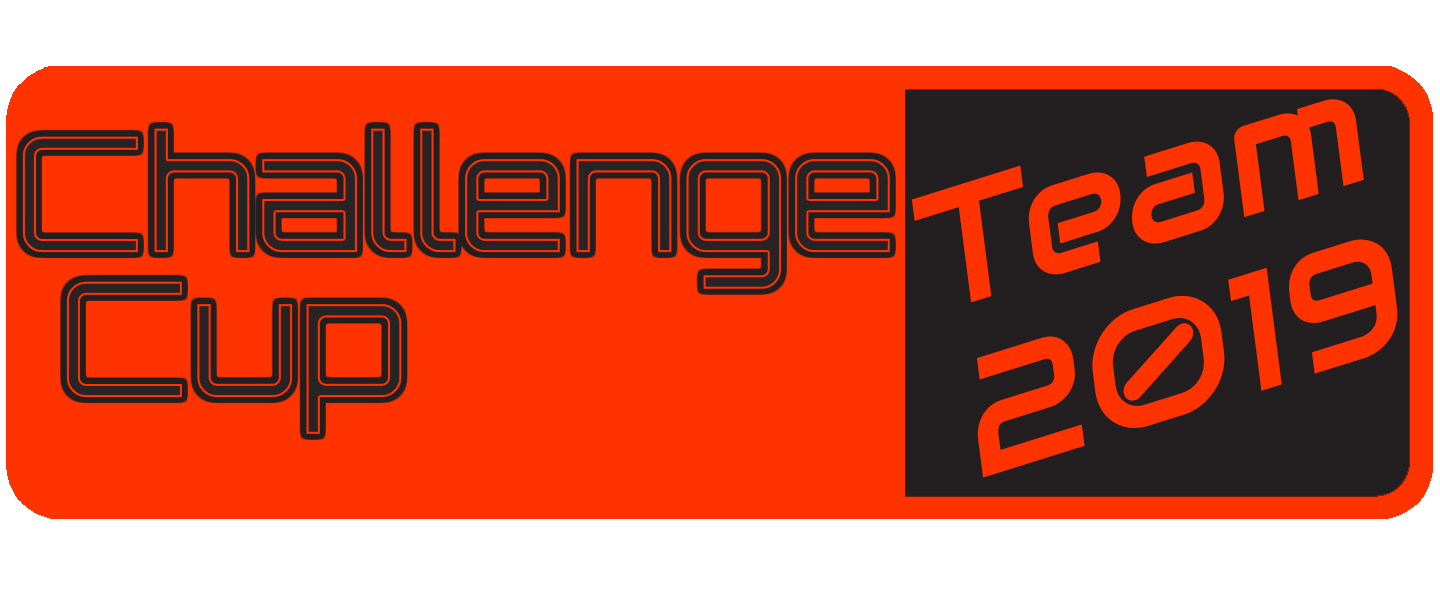
<style>
.page{position:relative;width:1440px;height:600px;background:#ff3300}
.page>*{position:absolute;margin:0}
.t1{font:165px/170.9px "Audiowide-Regular";color:#ff3300;font-style:italic}
.t2{font:180px/170.9px "Sneakout";color:#ff3300}
.t3{font:160px/145.1px "Orbitron-Regular";color:#282324}
</style>
<div class="page">
<p class="t1" style="left:911px;top:99px;width:487px;height:379px;rotate:-17deg"><span class="t2">   <br></span>Team<br>2019</p>
<p class="t3" style="left:22px;top:128px;width:868px;height:306px">Challenge<br> Cup</p>
</div>
